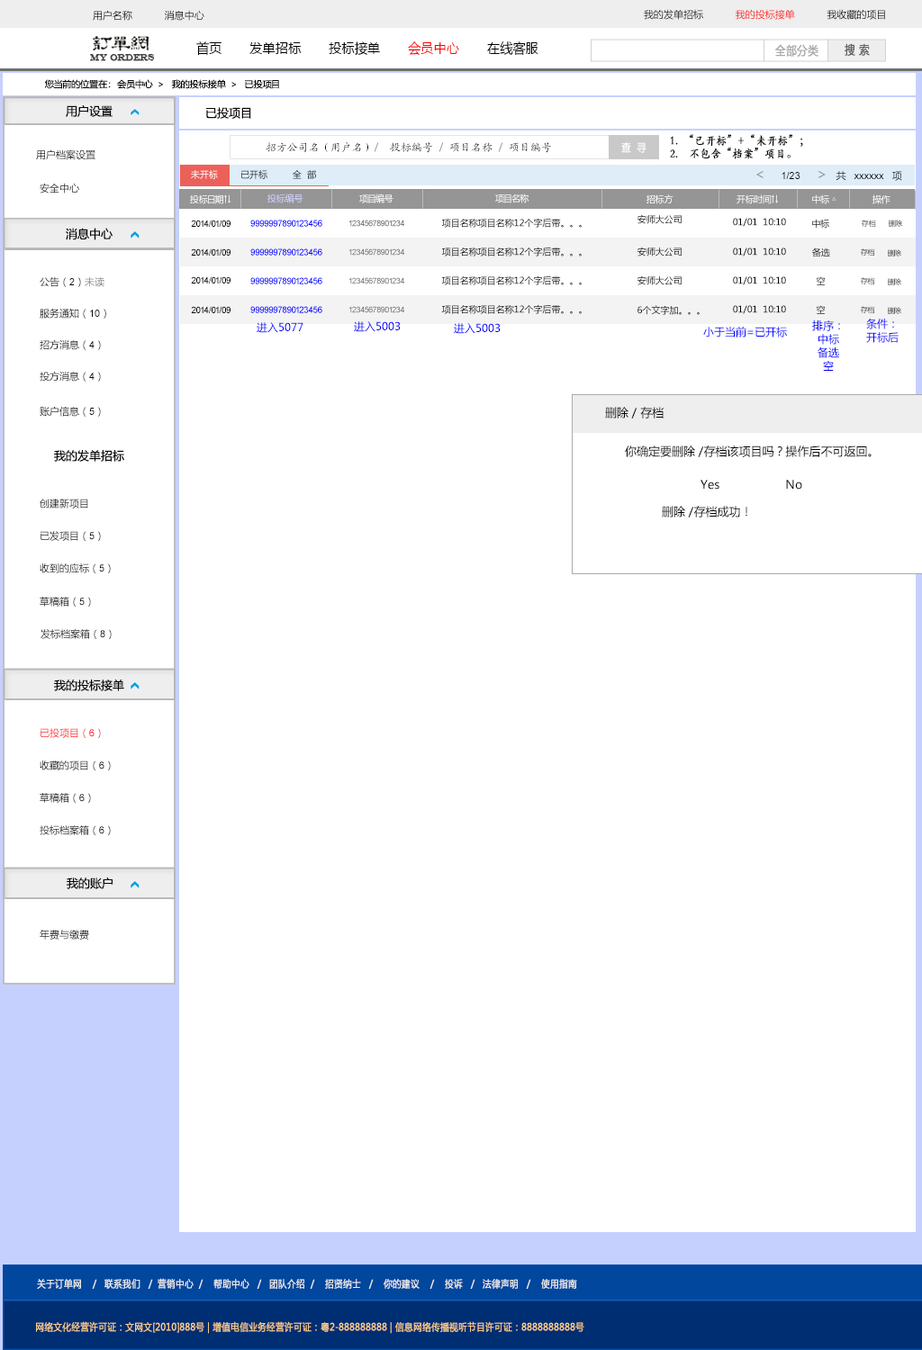
<style>
.page{position:relative;width:922px;height:1350px;background:#ffffff}
.page>*{position:absolute;margin:0}
.t1{font:9.9px "MicrosoftYaHei";color:#000000}
.t2{font:9.9px "MicrosoftYaHei"}
.t3{font:13.9px "MicrosoftYaHei";color:#000000;font-variant:small-caps;scale:0.94 1}
.t4{font:13.9px "MicrosoftYaHei";color:#ff0000;font-variant:small-caps;scale:0.94 1}
.t5{font:8.9px "EngraversMT";color:#434343;font-variant:small-caps;font-weight:bold;scale:0.86 1}
.t6{font:11.9px "MicrosoftYaHei";color:#aaaaaa;font-variant:small-caps;font-weight:bold;scale:0.86 1}
.t7{font:11.9px "MicrosoftYaHei";color:#626262;font-variant:small-caps;font-weight:bold;scale:0.86 1}
.t8{font:9px "MicrosoftYaHei";color:#060606}
.t9{font:11.7px "MicrosoftYaHei";color:#060606}
.t10{font:11.9px "STKaiti";color:#000000;font-variant:small-caps;font-weight:bold;scale:0.86 1}
.t11{font:9.9px "MicrosoftYaHei";color:#060606}
.t12{font:10.8px "KaiTi_GB2312";color:#000000}
.t13{font:10.9px "MicrosoftYaHei";color:#ffffff;font-variant:small-caps;font-weight:bold;scale:0.86 1}
.t14{font:9px "MicrosoftYaHei";color:#ffffff}
.t15{font:9.1px "MicrosoftYaHei"}
.t16{font:9.9px "ArialMT";color:#060606}
.t17{font:14.4px "MicrosoftYaHei";color:#959595}
.t18{font:9px "MicrosoftYaHei";color:#d1d2ff}
.t19{font:9px "ArialMT";color:#020202}
.t20{font:9px "ArialMT";color:#0000ff}
.t21{font:8.1px "ArialMT";color:#535353}
.t22{font:9px "MicrosoftYaHei";color:#000000}
.t23{font:9px "MicrosoftYaHei"}
.t24{font:7.2px "MicrosoftYaHei"}
.t25{font:8.1px "ArialMT";color:#626262}
.t26{font:9.9px "MicrosoftYaHei";color:#888584}
.t27{font:10.8px "MicrosoftYaHei";color:#0000ff}
.t28{font:10.8px/13.5px "MicrosoftYaHei";color:#0000ff}
.t29{font:11.7px "MicrosoftYaHei";color:#000000}
.t30{font:9.9px "ArialMT";color:#000000}
.t31{font:9.9px "ArialMT"}
.t32{font:9.9px "MicrosoftYaHei";color:#ff0000}
.t33{font:9.9px "ArialMT";color:#ff0000}
.t34{font:9.9px "MicrosoftYaHei";color:#eeeeee;font-variant:small-caps;font-weight:bold;scale:0.86 1}
.t35{font:13.9px "STXihei";color:#eeeeee;font-variant:small-caps;font-weight:bold;scale:0.86 1}
.t36{font:9.9px "MicrosoftYaHei";color:#facd89;font-variant:small-caps;font-weight:bold;scale:0.87 1}
.t37{font:9.9px "MicrosoftYaHei";color:#eeeeee;font-variant:small-caps;font-weight:bold;scale:0.87 1}
</style>
<div class="page">
<p class="t1" style="left:93px;top:10px;width:111px;height:11px">用户名称           消息中心</p>
<p class="t2" style="left:644px;top:9px;width:241px;height:11px">我的发单招标           我的投标接单           我收藏的项目</p>
<p class="t3" style="left:196px;top:41px;width:342px;height:15px">首页       发单招标       投标接单       <span class="t4">会员中心</span>       在线客服</p>
<p class="t5" style="left:90px;top:54px;width:65px;height:7px">MY ORDERS</p>
<p class="t6" style="left:775px;top:44px;width:43px;height:13px">全部分类</p>
<p class="t7" style="left:844px;top:43px;width:25px;height:13px">搜 索</p>
<p class="t8" style="left:44px;top:79px;width:235px;height:10px">您当前的位置在：  会员中心  &gt;   我的投标接单  &gt;   已投项目</p>
<p class="t9" style="left:66px;top:105px;width:46px;height:12px">用户设置</p>
<p class="t9" style="left:206px;top:107px;width:45px;height:12px">已投项目</p>
<p class="t10" style="left:670px;top:134px;width:133px;height:25px">1.  “已开标”+“未开标”；<br>2.    不包含“档案”项目。</p>
<p class="t11" style="left:36px;top:149px;width:59px;height:11px">用户档案设置</p>
<p class="t12" style="left:266px;top:142px;width:285px;height:11px">招方公司名（用户名）/  投标编号 / 项目名称 / 项目编号</p>
<p class="t13" style="left:621px;top:142px;width:25px;height:11px">查  寻</p>
<p class="t14" style="left:191px;top:170px;width:27px;height:9px">未开标</p>
<p class="t15" style="left:241px;top:170px;width:26px;height:9px">已开标</p>
<p class="t15" style="left:292px;top:170px;width:24px;height:9px">全  部</p>
<p class="t16" style="left:756px;top:170px;width:146px;height:11px"><span class="t17">&lt;     </span>1/23     <span class="t17">&gt;  </span><span class="t11">共  </span>xxxxxx  <span class="t11">项</span></p>
<p class="t2" style="left:40px;top:183px;width:39px;height:11px">安全中心</p>
<p class="t14" style="left:190px;top:194px;width:41px;height:10px">投标日期↑↓</p>
<p class="t18" style="left:267px;top:194px;width:36px;height:9px">投标编号</p>
<p class="t14" style="left:359px;top:194px;width:34px;height:9px">项目编号</p>
<p class="t14" style="left:495px;top:194px;width:34px;height:9px">项目名称</p>
<p class="t14" style="left:646px;top:194px;width:27px;height:10px">招标方</p>
<p class="t14" style="left:736px;top:194px;width:42px;height:10px">开标时间↑↓</p>
<p class="t14" style="left:812px;top:194px;width:24px;height:10px">中标 △</p>
<p class="t14" style="left:872px;top:194px;width:18px;height:10px">操作</p>
<p class="t19" style="left:191px;top:220px;width:39px;height:7px">2014/01/09</p>
<p class="t20" style="left:250px;top:220px;width:72px;height:7px">9999997890123456</p>
<p class="t21" style="left:349px;top:220px;width:55px;height:7px">12345678901234</p>
<p class="t22" style="left:441px;top:218px;width:140px;height:10px">项目名称项目名称12个字后带。。。</p>
<p class="t23" style="left:637px;top:214px;width:44px;height:10px">安师大公司</p>
<p class="t22" style="left:733px;top:218px;width:53px;height:9px">01/01  10:10</p>
<p class="t23" style="left:812px;top:219px;width:17px;height:10px">中标</p>
<p class="t24" style="left:860px;top:220px;width:16px;height:7px"><span class="t23">  </span>存档</p>
<p class="t24" style="left:888px;top:220px;width:15px;height:7px"><span class="t23">  </span>删除</p>
<p class="t9" style="left:66px;top:228px;width:46px;height:12px">消息中心</p>
<p class="t19" style="left:191px;top:248px;width:39px;height:8px">2014/01/09</p>
<p class="t20" style="left:250px;top:248px;width:72px;height:8px">9999997890123456</p>
<p class="t25" style="left:349px;top:248px;width:55px;height:8px">12345678901234</p>
<p class="t22" style="left:441px;top:247px;width:140px;height:9px">项目名称项目名称12个字后带。。。</p>
<p class="t23" style="left:637px;top:247px;width:44px;height:9px">安师大公司</p>
<p class="t22" style="left:733px;top:248px;width:53px;height:8px">01/01  10:10</p>
<p class="t23" style="left:812px;top:248px;width:18px;height:9px">备选</p>
<p class="t24" style="left:860px;top:248px;width:15px;height:8px">存档</p>
<p class="t24" style="left:887px;top:249px;width:14px;height:7px">删除</p>
<p class="t11" style="left:40px;top:276px;width:64px;height:11px">公告（<span class="t16">2</span>）<span class="t26">未读</span></p>
<p class="t19" style="left:191px;top:276px;width:39px;height:8px">2014/01/09</p>
<p class="t20" style="left:250px;top:277px;width:72px;height:7px">9999997890123456</p>
<p class="t25" style="left:349px;top:277px;width:55px;height:7px">12345678901234</p>
<p class="t22" style="left:441px;top:275px;width:140px;height:10px">项目名称项目名称12个字后带。。。</p>
<p class="t23" style="left:637px;top:275px;width:44px;height:10px">安师大公司</p>
<p class="t22" style="left:733px;top:276px;width:53px;height:9px">01/01  10:10</p>
<p class="t23" style="left:815px;top:276px;width:10px;height:9px">空</p>
<p class="t24" style="left:860px;top:277px;width:15px;height:7px">存档</p>
<p class="t24" style="left:887px;top:278px;width:14px;height:7px">删除</p>
<p class="t22" style="left:441px;top:304px;width:140px;height:10px">项目名称项目名称12个字后带。。。</p>
<p class="t22" style="left:637px;top:305px;width:62px;height:10px">6个文字加。。。</p>
<p class="t22" style="left:733px;top:305px;width:53px;height:9px">01/01  10:10</p>
<p class="t23" style="left:815px;top:305px;width:10px;height:9px">空</p>
<p class="t11" style="left:40px;top:308px;width:66px;height:11px">服务通知（<span class="t16">10</span>）</p>
<p class="t19" style="left:191px;top:306px;width:39px;height:7px">2014/01/09</p>
<p class="t20" style="left:250px;top:306px;width:72px;height:7px">9999997890123456</p>
<p class="t25" style="left:349px;top:306px;width:55px;height:7px">12345678901234</p>
<p class="t24" style="left:860px;top:306px;width:15px;height:7px">存档</p>
<p class="t24" style="left:887px;top:307px;width:14px;height:7px">删除</p>
<p class="t27" style="left:256px;top:322px;width:47px;height:11px">进入5077</p>
<p class="t27" style="left:354px;top:321px;width:46px;height:11px">进入5003</p>
<p class="t27" style="left:454px;top:323px;width:46px;height:11px">进入5003</p>
<p class="t27" style="left:703px;top:327px;width:84px;height:11px">小于当前=已开标</p>
<p class="t28" style="left:812px;top:320px;width:28px;height:51px;text-align:center">排序：<br>中标<br>备选<br>空</p>
<p class="t28" style="left:866px;top:319px;width:32px;height:24px;text-align:center">条件：<br>开标后</p>
<p class="t11" style="left:40px;top:339px;width:61px;height:11px">招方消息（<span class="t16">4</span>）</p>
<p class="t11" style="left:40px;top:371px;width:61px;height:11px">投方消息（<span class="t16">4</span>）</p>
<p class="t11" style="left:40px;top:406px;width:61px;height:11px">账户信息（<span class="t16">5</span>）</p>
<p class="t29" style="left:605px;top:407px;width:58px;height:11px">删除 / 存档</p>
<p class="t29" style="left:625px;top:446px;width:246px;height:11px">你确定要删除 /存档该项目吗？操作后不可返回。</p>
<p class="t9" style="left:54px;top:450px;width:70px;height:12px">我的发单招标</p>
<p class="t29" style="left:700px;top:480px;width:102px;height:10px">Yes                   No</p>
<p class="t2" style="left:40px;top:499px;width:48px;height:9px">创建新项目</p>
<p class="t29" style="left:662px;top:506px;width:85px;height:12px">删除 /存档成功！</p>
<p class="t1" style="left:40px;top:531px;width:61px;height:10px">已发项目（<span class="t30">5</span>）</p>
<p class="t11" style="left:40px;top:563px;width:71px;height:10px">收到的应标（<span class="t16">5</span>）</p>
<p class="t11" style="left:40px;top:597px;width:51px;height:10px">草稿箱（<span class="t16">5</span>）</p>
<p class="t2" style="left:40px;top:629px;width:72px;height:10px">发标档案箱（<span class="t31">8</span>）</p>
<p class="t9" style="left:54px;top:680px;width:70px;height:11px">我的投标接单</p>
<p class="t32" style="left:40px;top:728px;width:61px;height:10px">已投项目（<span class="t33">6</span>）</p>
<p class="t11" style="left:40px;top:760px;width:71px;height:10px">收藏的项目（<span class="t16">6</span>）</p>
<p class="t11" style="left:40px;top:793px;width:51px;height:10px">草稿箱（<span class="t16">6</span>）</p>
<p class="t11" style="left:40px;top:825px;width:71px;height:10px">投标档案箱（<span class="t16">6</span>）</p>
<p class="t9" style="left:67px;top:878px;width:45px;height:11px">我的账户</p>
<p class="t11" style="left:40px;top:930px;width:49px;height:10px">年费与缴费</p>
<p class="t34" style="left:37px;top:1278px;width:540px;height:11px"><span class="t35"><br><br></span>关于订单网    /   联系我们   /  营销中心  /    帮助中心   /   团队介绍  /    招贤纳士   /    你的建议    /    投诉   /   法律声明   /    使用指南</p>
<p class="t36" style="left:36px;top:1321px;width:548px;height:13px"><span class="t37"> </span>网络文化经营许可证：文网文[2010]888号 | 增值电信业务经营许可证：粤2-888888888 | 信息网络传播视听节目许可证：8888888888号</p>
</div>
